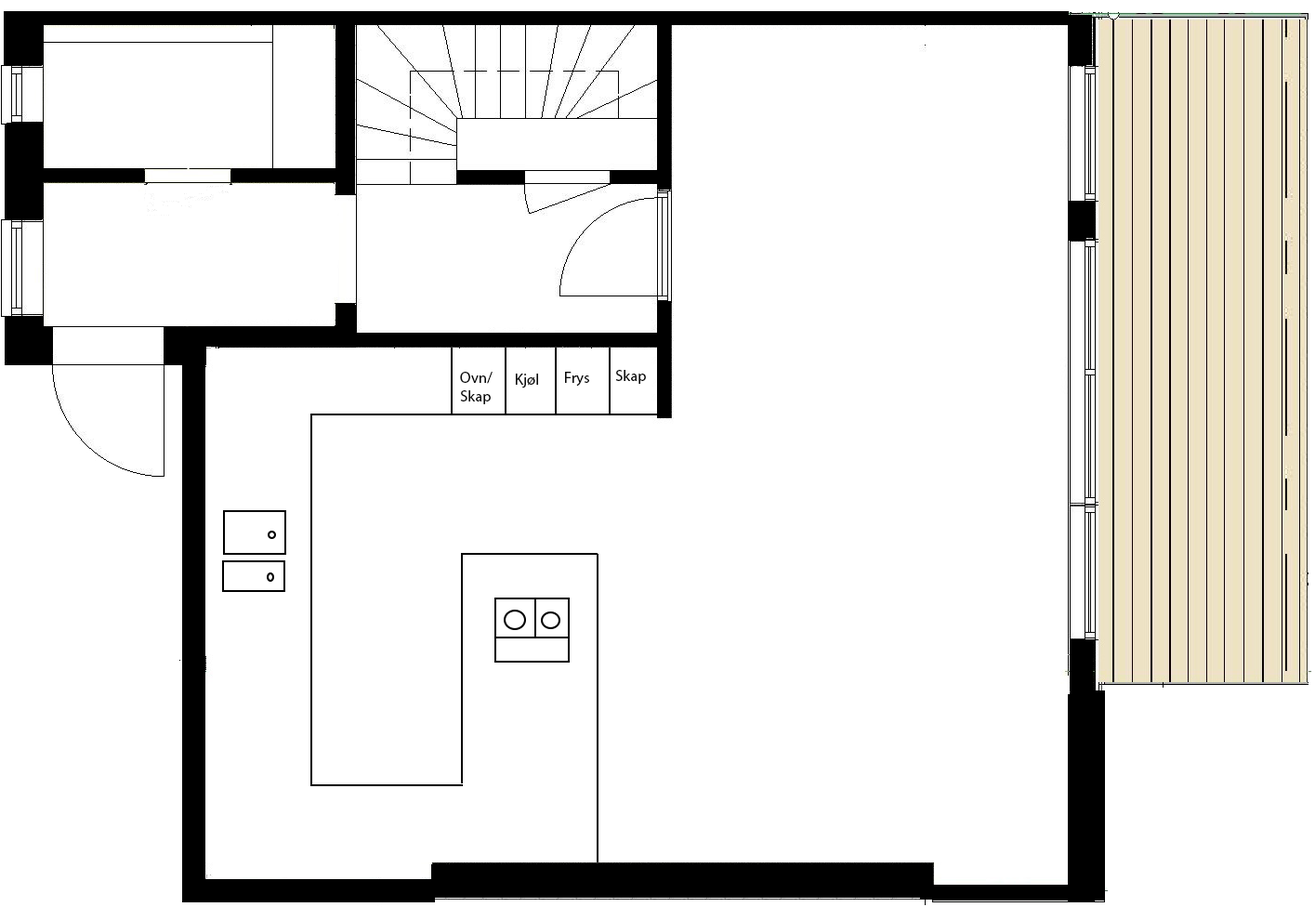
<style>
.page{position:relative;width:1315px;height:907px;background:#ffffff}
.page>*{position:absolute;margin:0}
.t1{font:15.5px "MyriadPro-Regular";color:#0a0a0a}
</style>
<div class="page">
<p class="t1" style="left:460px;top:372px;width:32px;height:32px">Ovn/<br>Skap</p>
<p class="t1" style="left:516px;top:374px;width:22px;height:14px">Kjøl</p>
<p class="t1" style="left:565px;top:372px;width:24px;height:15px">Frys</p>
<p class="t1" style="left:615px;top:370px;width:31px;height:14px">Skap</p>
</div>
